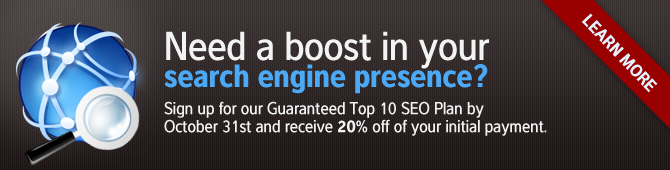
<style>
.page{position:relative;width:670px;height:170px}
.page>*{position:absolute;margin:0}
.t1{font:18px "IntervalSansPro-BoldCond";color:#e5f3ff}
.t2{font:33.5px/27px "IntervalSansPro-BoldCond";color:#4ca9f6}
.t3{font:42px/27px "IntervalSansPro-MedCond";color:#f3f3f3}
.t4{font:18px/18px "IntervalSansPro-MedCond";color:#f3f3f3}
.t5{font:18px/18px "IntervalSansPro-BoldCond";color:#f3f3f3}
</style>
<div class="page">
<p class="t1" style="left:581px;top:13px;width:77px;height:80px;rotate:46deg">LEARN MORE</p>
<p class="t2" style="left:164px;top:31px;width:325px;height:63px"><span class="t3">Need a boost in your <br></span>search engine presence?</p>
<p class="t4" style="left:164px;top:101px;width:383px;height:35px">Sign up for our Guaranteed Top 10 SEO Plan by <br>October 31st and receive <span class="t5">20%</span> off of your initial payment.</p>
</div>
